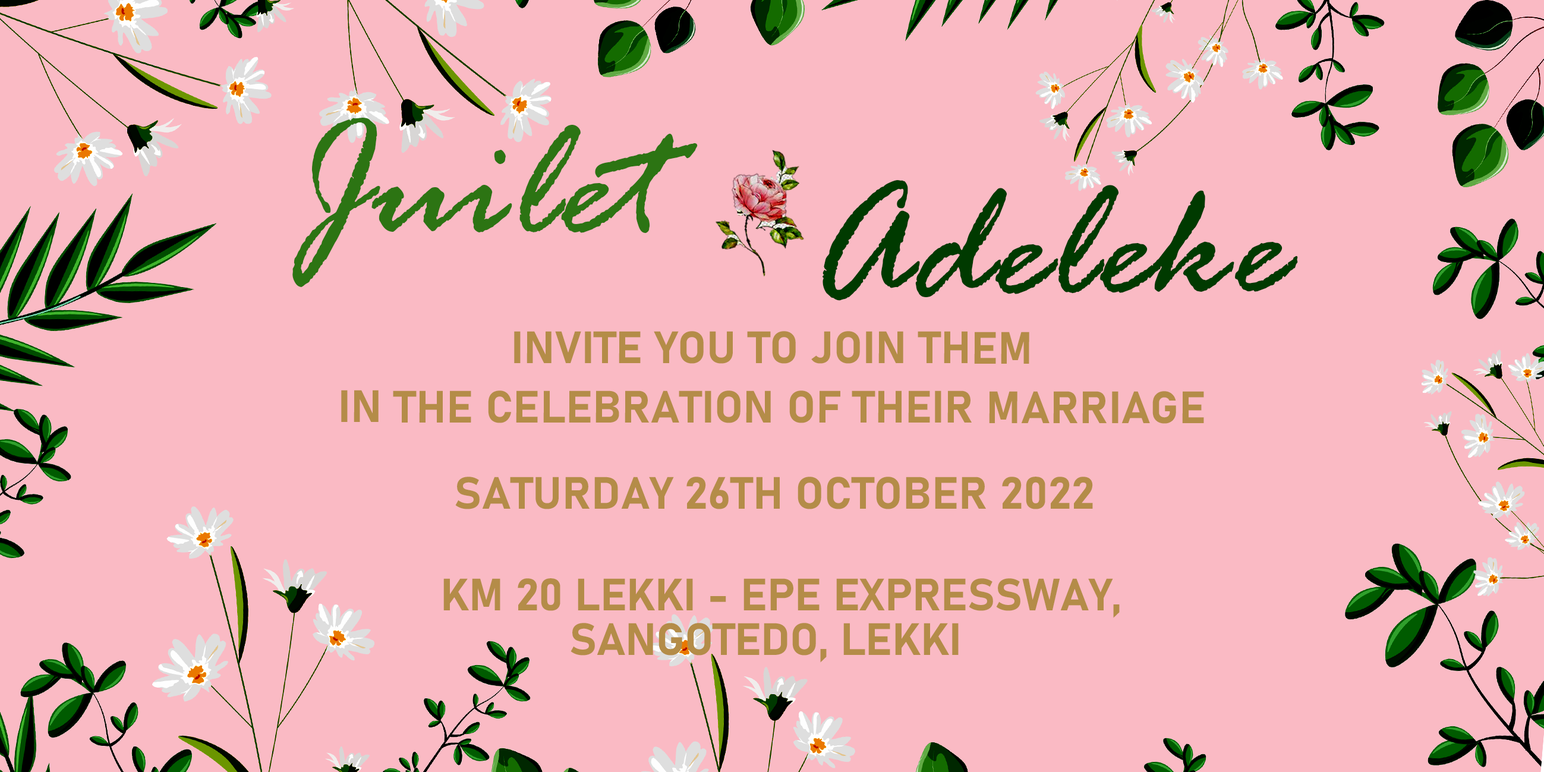
<style>
.page{position:relative;width:1544px;height:772px;background:#fabac4}
.page>*{position:absolute;margin:0}
.t1{font:178.3px "RageItalic";color:#2c7413}
.t2{font:178.3px "RageItalic";color:#003a00}
.t3{font:44.6px/59.4px "Bahnschrift-Bold";letter-spacing:0.005em;color:#b48c48}
.t4{font:44.6px "Bahnschrift-Bold";letter-spacing:0.005em;color:#b48c48}
.t5{font:44.6px/44.6px "Bahnschrift-Bold";letter-spacing:0.005em;color:#b48c48}
</style>
<div class="page">
<p class="t1" style="left:292px;top:118px;width:406px;height:169px">Juilet</p>
<p class="t2" style="left:823px;top:180px;width:475px;height:121px;rotate:-1deg">Adeleke</p>
<p class="t3" style="left:341px;top:331px;width:863px;height:93px;text-align:center">INVITE YOU TO JOIN THEM <br>IN THE CELEBRATION OF THEIR MARRIAGE</p>
<p class="t4" style="left:455px;top:477px;width:638px;height:32px">SATURDAY 26TH OCTOBER 2022</p>
<p class="t5" style="left:443px;top:578px;width:677px;height:85px">KM 20 LEKKI - EPE EXPRESSWAY, <br>           SANGOTEDO, LEKKI</p>
</div>
